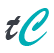
<style>
.page{position:relative;width:54px;height:53px;background:#ffffff}
.page>*{position:absolute;margin:0}
.t1{font:48px "BrushScriptMT";color:#393e46}
.t2{font:48px "BrushScriptMT";color:#00adb5}
</style>
<div class="page">
<p class="t1" style="left:5px;top:8px;width:44px;height:38px">t<span class="t2">C</span></p>
</div>
